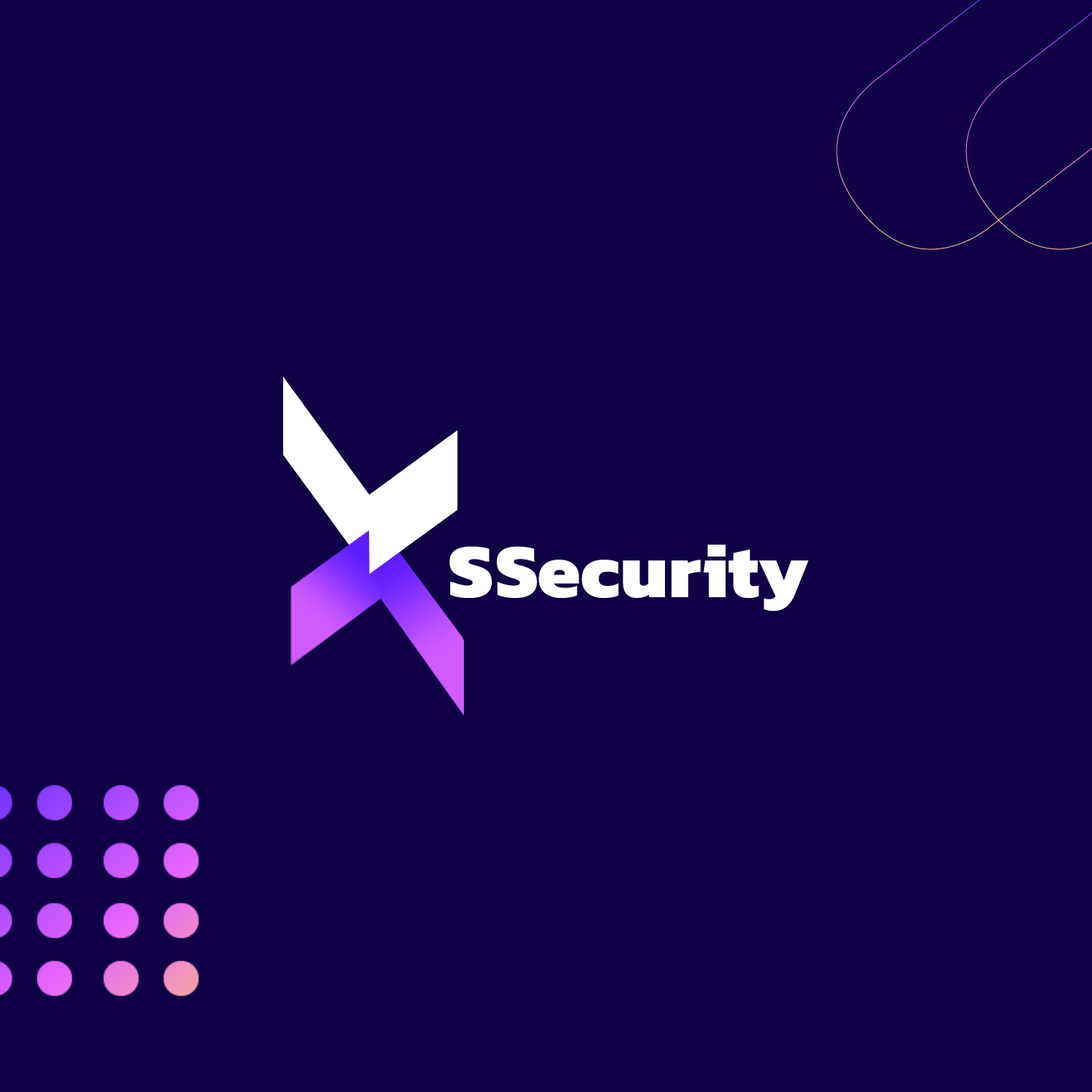
<style>
.page{position:relative;width:1092px;height:1092px;background:#100146}
.page>*{position:absolute;margin:0}
.t1{font:77.6px "Kanit-ExtraBold";letter-spacing:0.004em;color:#ffffff}
.t2{font:77.6px "Kanit-ExtraBold";letter-spacing:0.046em;color:#ffffff;font-weight:bold}
.t3{font:77.6px "Kanit-ExtraBold";letter-spacing:-0.001em;color:#ffffff}
.t4{font:77.6px "Kanit-ExtraBold";letter-spacing:0.031em;color:#ffffff}
.t5{font:77.6px "Kanit-ExtraBold";color:#ffffff}
.t6{font:77.6px "Kanit-ExtraBold";letter-spacing:0.027em;color:#ffffff}
</style>
<div class="page">
<p class="t1" style="left:450px;top:544px;width:359px;height:68px"><span class="t2">S</span><span class="t3">S</span><span class="t4">e</span>cu<span class="t5">ri</span><span class="t6">ty</span></p>
</div>
